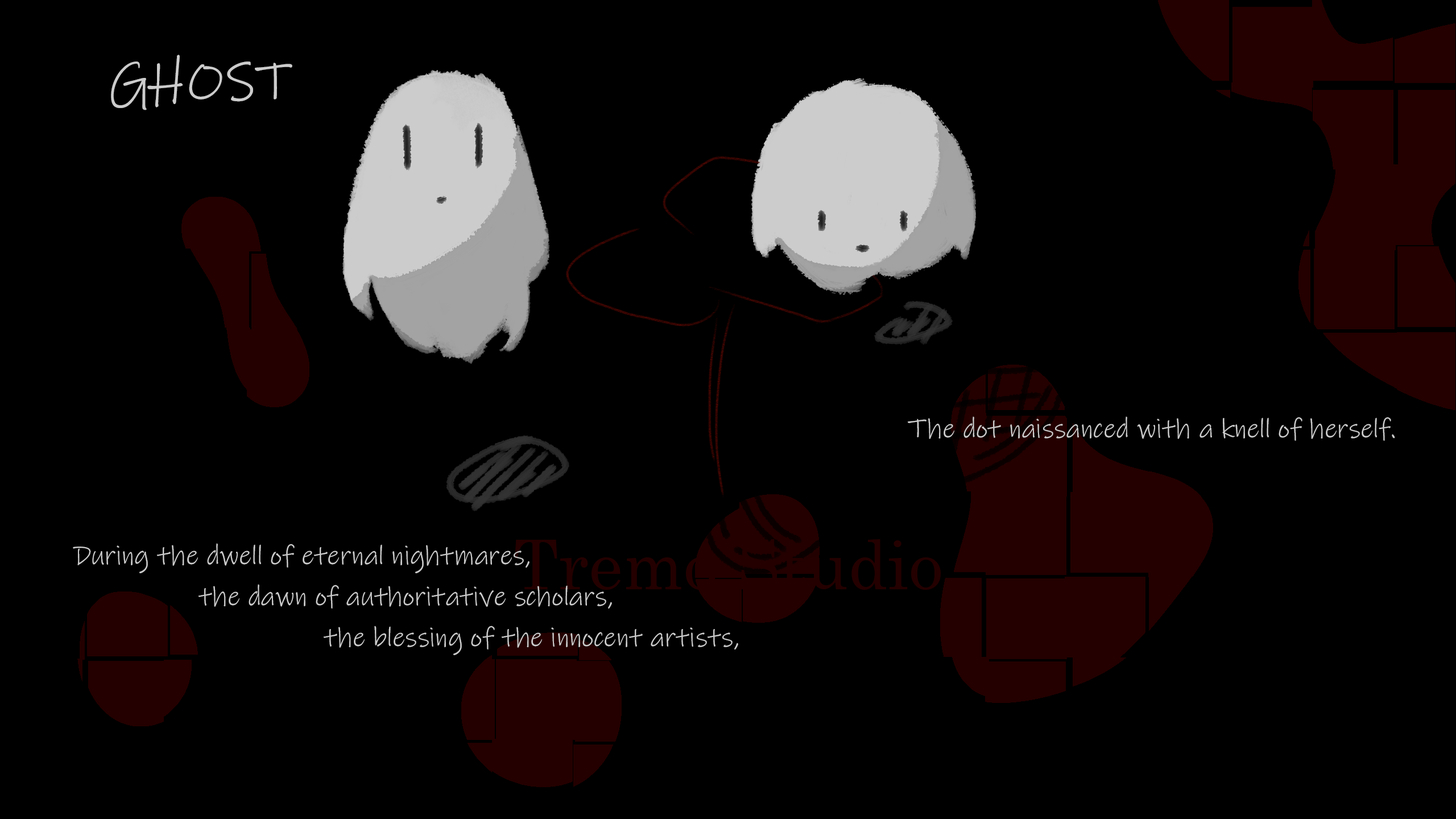
<style>
.page{position:relative;width:1456px;height:819px;background:#000000}
.page>*{position:absolute;margin:0}
.t1{font:54.6px "InkFree";color:#cccccc}
.t2{font:27.3px "InkFree";color:#cccccc}
.t3{font:27.3px/40.9px "InkFree";color:#cccccc}
.t4{font:68.2px "Century";color:#240000}
</style>
<div class="page">
<p class="t1" style="left:111px;top:55px;width:181px;height:55px">GHOST</p>
<p class="t2" style="left:908px;top:416px;width:487px;height:25px">The dot naissanced with a knell of herself.</p>
<p class="t3" style="left:73px;top:543px;width:665px;height:112px">During the dwell of eternal nightmares, <br>                the dawn of authoritative scholars, <br>                                the blessing of the innocent artists,</p>
<p class="t4" style="left:515px;top:539px;width:426px;height:51px">Tremo Studio</p>
</div>
